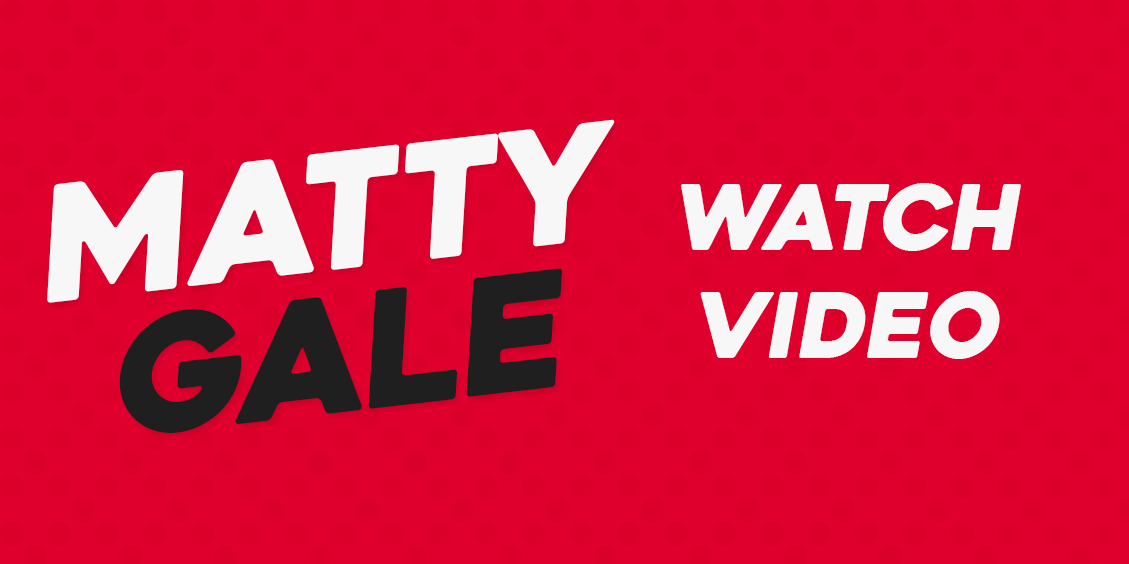
<style>
.page{position:relative;width:1129px;height:564px;background:#df002e}
.page>*{position:absolute;margin:0}
.t1{font:160px "Heavitas";color:#f7f7f7;font-style:italic}
.t2{font:90px "Heavitas";color:#f7f7f7;font-style:italic}
.t3{font:160px "Heavitas";color:#1f1f1f;font-style:italic}
</style>
<div class="page">
<p class="t1" style="left:47px;top:119px;width:568px;height:184px;rotate:-7deg">MATTY</p>
<p class="t2" style="left:681px;top:183px;width:340px;height:176px;text-align:center">WATCH<br>VIDEO</p>
<p class="t3" style="left:119px;top:268px;width:443px;height:165px;rotate:-7deg">GALE</p>
</div>
